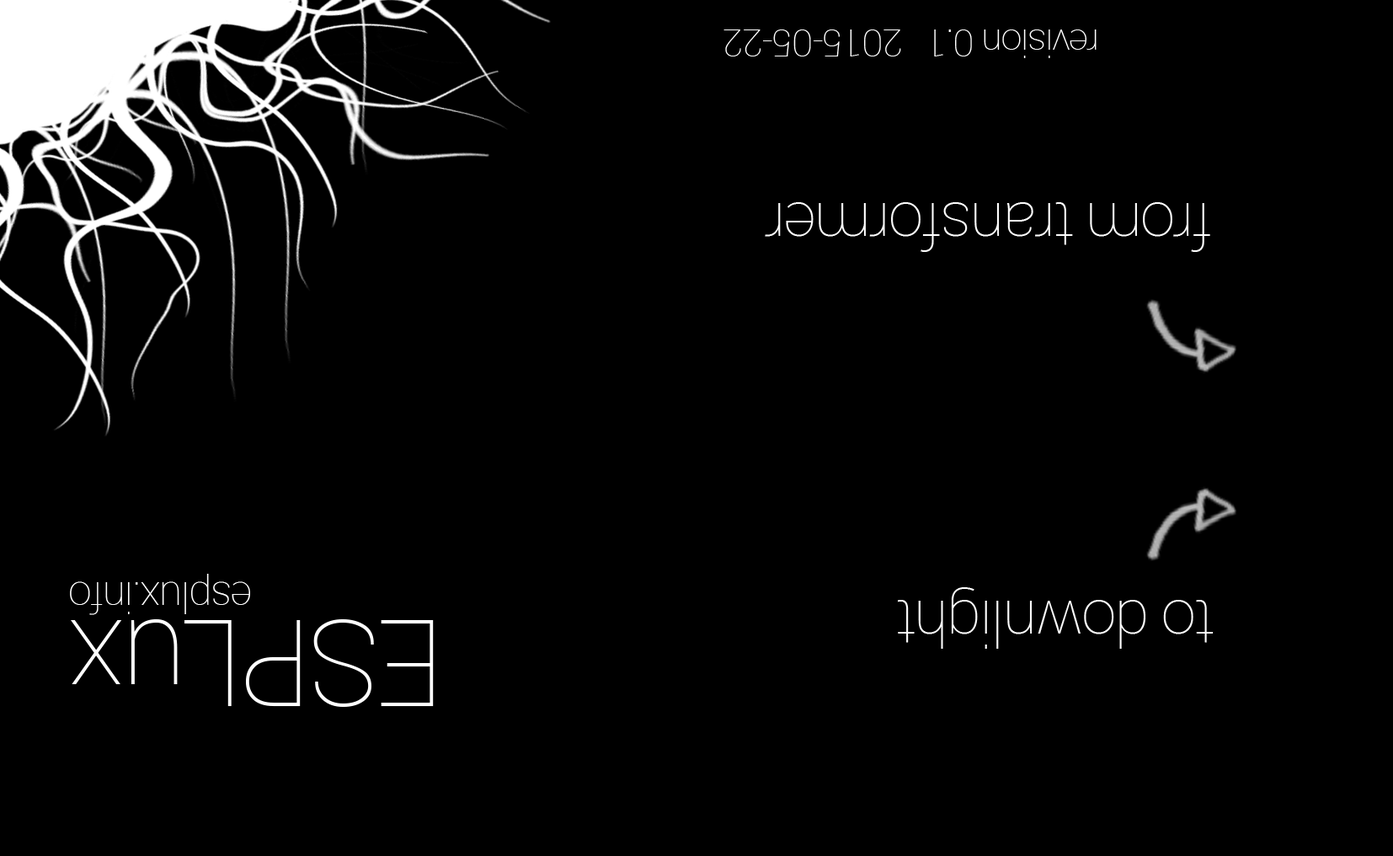
<style>
.page{position:relative;width:1393px;height:856px;background:#000000}
.page>*{position:absolute;margin:0}
.t1{font:37.7px "Roboto-Thin";letter-spacing:-0.025em;color:#ffffff}
.t2{font:63.2px "Roboto-Thin";letter-spacing:-0.025em;color:#ffffff}
.t3{font:42.1px "Roboto-Thin";letter-spacing:-0.025em;color:#ffffff}
.t4{font:119.6px "Roboto-Thin";letter-spacing:-0.025em;color:#ffffff}
</style>
<div class="page">
<p class="t1" style="left:724px;top:29px;width:373px;height:29px;rotate:180deg">revision 0.1   2015-05-22</p>
<p class="t2" style="left:765px;top:202px;width:445px;height:50px;rotate:180deg">from transformer</p>
<p class="t3" style="left:70px;top:574px;width:180px;height:41px;rotate:180deg">esplux.info</p>
<p class="t2" style="left:897px;top:587px;width:317px;height:62px;rotate:180deg">to downlight</p>
<p class="t4" style="left:71px;top:619px;width:363px;height:88px;rotate:180deg">ESPLux</p>
</div>
